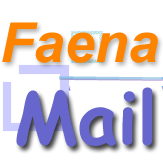
<style>
.page{position:relative;width:163px;height:163px;background:#ffffff}
.page>*{position:absolute;margin:0}
.t1{font:55px "Arial-BoldItalicMT";color:#fe8400}
.t2{font:72px "ComicSansMS-Bold";color:#6666cc}
</style>
<div class="page">
<p class="t1" style="left:2px;top:22px;width:156px;height:41px">Faena</p>
<p class="t2" style="left:16px;top:87px;width:137px;height:60px">Mail</p>
</div>
